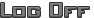
<style>
.page{position:relative;width:94px;height:18px;background:#ffffff}
.page>*{position:absolute;margin:0}
.t1{font:20px "MobitaleVersalete";color:#7b7b7b}
</style>
<div class="page">
<p class="t1" style="left:1px;top:3px;width:88px;height:14px">Log Off</p>
</div>
